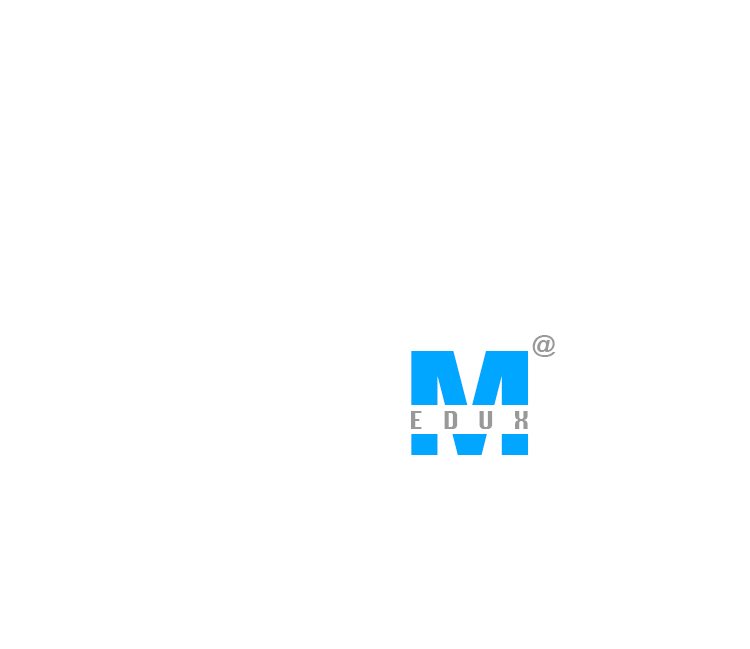
<style>
.page{position:relative;width:750px;height:649px;background:#ffffff}
.page>*{position:absolute;margin:0}
.t1{font:24px "ArialRoundedMTBold";color:#999999}
.t2{font:145px "Arial-Black";color:#00a6ff}
.t3{font:24px "Silom";color:#999999;scale:1.04 1}
</style>
<div class="page">
<p class="t1" style="left:532px;top:335px;width:24px;height:22px">@</p>
<p class="t2" style="left:411px;top:351px;width:118px;height:104px">M</p>
<p class="t3" style="left:411px;top:411px;width:117px;height:18px">E   D   U   X</p>
</div>
